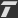
<style>
.page{position:relative;width:18px;height:18px;background:#333333}
.page>*{position:absolute;margin:0}
.t1{font:22.7px "BladeRunnerMovieFont";color:#e0e0e0;font-style:italic}
</style>
<div class="page">
<p class="t1" style="left:0px;top:1px;width:18px;height:16px">T</p>
</div>
